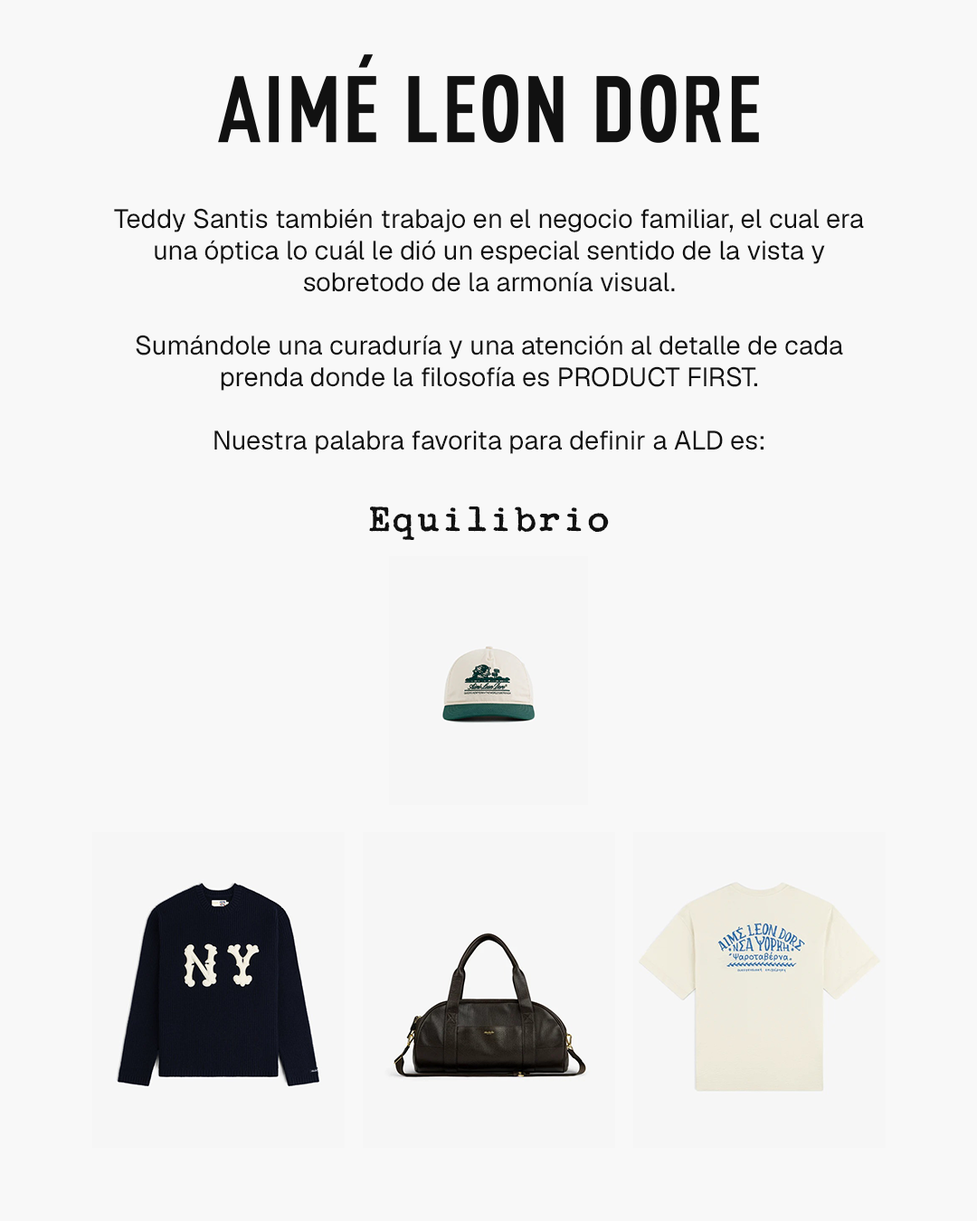
<style>
.page{position:relative;width:977px;height:1221px;background:#f8f8f8}
.page>*{position:absolute;margin:0}
.t1{font:26.4px "Geist-Regular";color:#111111}
.t2{font:41.4px "SecretServiceTypewriterRR-Regular";color:#111111}
</style>
<div class="page">
<p class="t1" style="left:114px;top:208px;width:750px;height:332px;text-align:center">Teddy Santis también trabajo en el negocio familiar, el cual era una óptica lo cuál le dió un especial sentido de la vista y sobretodo de la armonía visual.<br><br>Sumándole una curaduría y una atención al detalle de cada prenda donde la filosofía es PRODUCT FIRST.<br><br>Nuestra palabra favorita para definir a ALD es: <br><br><span class="t2">Equilibrio</span></p>
</div>
